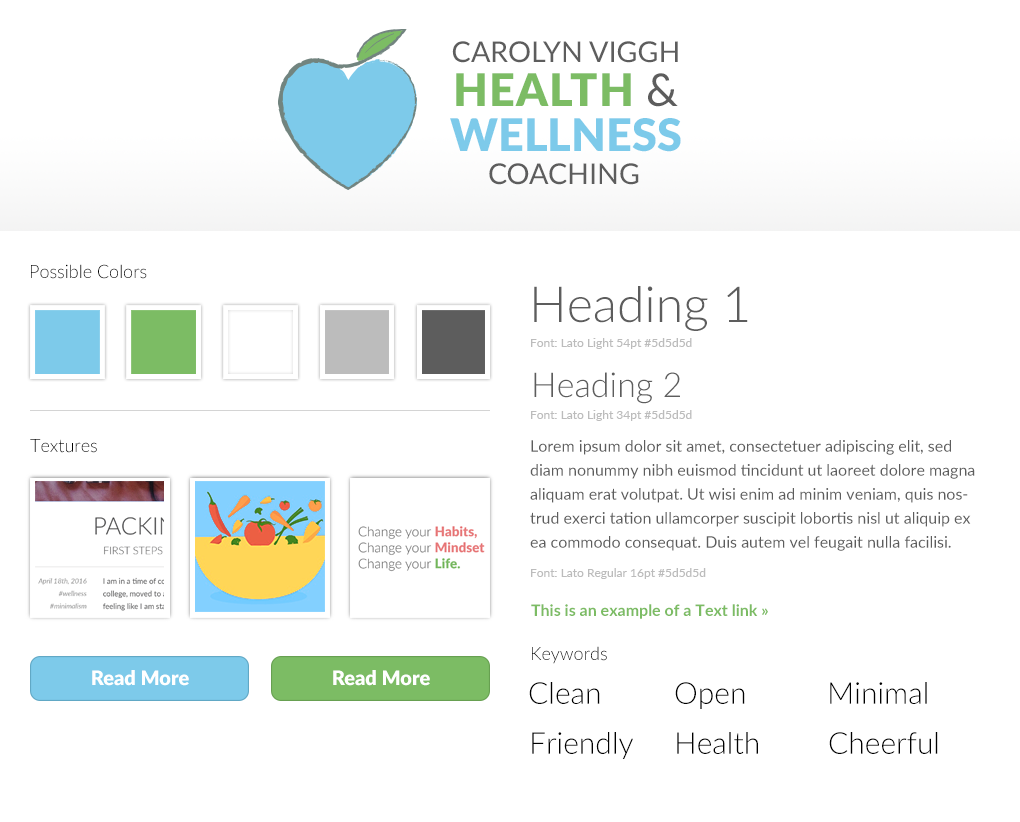
<style>
.page{position:relative;width:1020px;height:822px;background:#ffffff}
.page>*{position:absolute;margin:0}
.t1{font:28.7px "Lato-Regular";color:#5d5d5d}
.t2{font:45.1px/45.1px "Lato-Black";color:#7dcaea}
.t3{font:45.1px/45.1px "Lato-Black";letter-spacing:0.025em;color:#7cbc64}
.t4{font:45.1px/45.1px "Lato-Regular";letter-spacing:0.025em;color:#5d5d5d}
.t5{font:18px "Lato-Light";color:#000000}
.t6{font:50px "Lato-Light";color:#5d5d5d}
.t7{font:12px "Lato-Regular";color:#bcbcbc}
.t8{font:34px "Lato-Light";color:#5d5d5d}
.t9{font:16px/24px "Lato-Regular";color:#5d5d5d}
.t10{font:16px "Lato-Bold";color:#7cbc64}
.t11{font:18px "Lato-Light"}
.t12{font:20px "Lato-Black";color:#ffffff}
.t13{font:30px "Lato-Light";color:#000000}
</style>
<div class="page">
<p class="t1" style="left:452px;top:41px;width:226px;height:22px">CAROLYN VIGGH</p>
<p class="t2" style="left:450px;top:73px;width:231px;height:79px;text-align:center"><span class="t3">HEALTH </span><span class="t4">&amp;<br></span>WELLNESS</p>
<p class="t1" style="left:489px;top:163px;width:150px;height:22px">COACHING</p>
<p class="t5" style="left:31px;top:264px;width:116px;height:15px">Possible Colors</p>
<p class="t6" style="left:534px;top:286px;width:214px;height:45px">Heading 1</p>
<p class="t7" style="left:531px;top:338px;width:161px;height:11px">Font: Lato Light 54pt #5d5d5d</p>
<p class="t8" style="left:534px;top:372px;width:146px;height:32px">Heading 2</p>
<p class="t7" style="left:531px;top:410px;width:161px;height:11px">Font: Lato Light 34pt #5d5d5d</p>
<p class="t5" style="left:30px;top:439px;width:67px;height:14px">Textures</p>
<p class="t9" style="left:530px;top:440px;width:445px;height:111px">Lorem ipsum dolor sit amet, consectetuer adipiscing elit, sed diam nonummy nibh euismod tincidunt ut laoreet dolore magna aliquam erat volutpat. Ut wisi enim ad minim veniam, quis nostrud exerci tation ullamcorper suscipit lobortis nisl ut aliquip ex ea commodo consequat. Duis autem vel feugait nulla facilisi.</p>
<p class="t7" style="left:531px;top:568px;width:175px;height:11px">Font: Lato Regular 16pt #5d5d5d</p>
<p class="t10" style="left:531px;top:604px;width:237px;height:15px">This is an example of a Text link »</p>
<p class="t11" style="left:532px;top:646px;width:75px;height:18px">Keywords</p>
<p class="t12" style="left:92px;top:670px;width:97px;height:16px">Read More</p>
<p class="t12" style="left:333px;top:670px;width:97px;height:16px">Read More</p>
<p class="t13" style="left:529px;top:682px;width:71px;height:22px">Clean</p>
<p class="t13" style="left:675px;top:682px;width:70px;height:27px">Open</p>
<p class="t13" style="left:830px;top:682px;width:97px;height:22px">Minimal</p>
<p class="t13" style="left:532px;top:732px;width:101px;height:27px">Friendly</p>
<p class="t13" style="left:677px;top:732px;width:81px;height:22px">Health</p>
<p class="t13" style="left:829px;top:732px;width:109px;height:22px">Cheerful</p>
</div>
